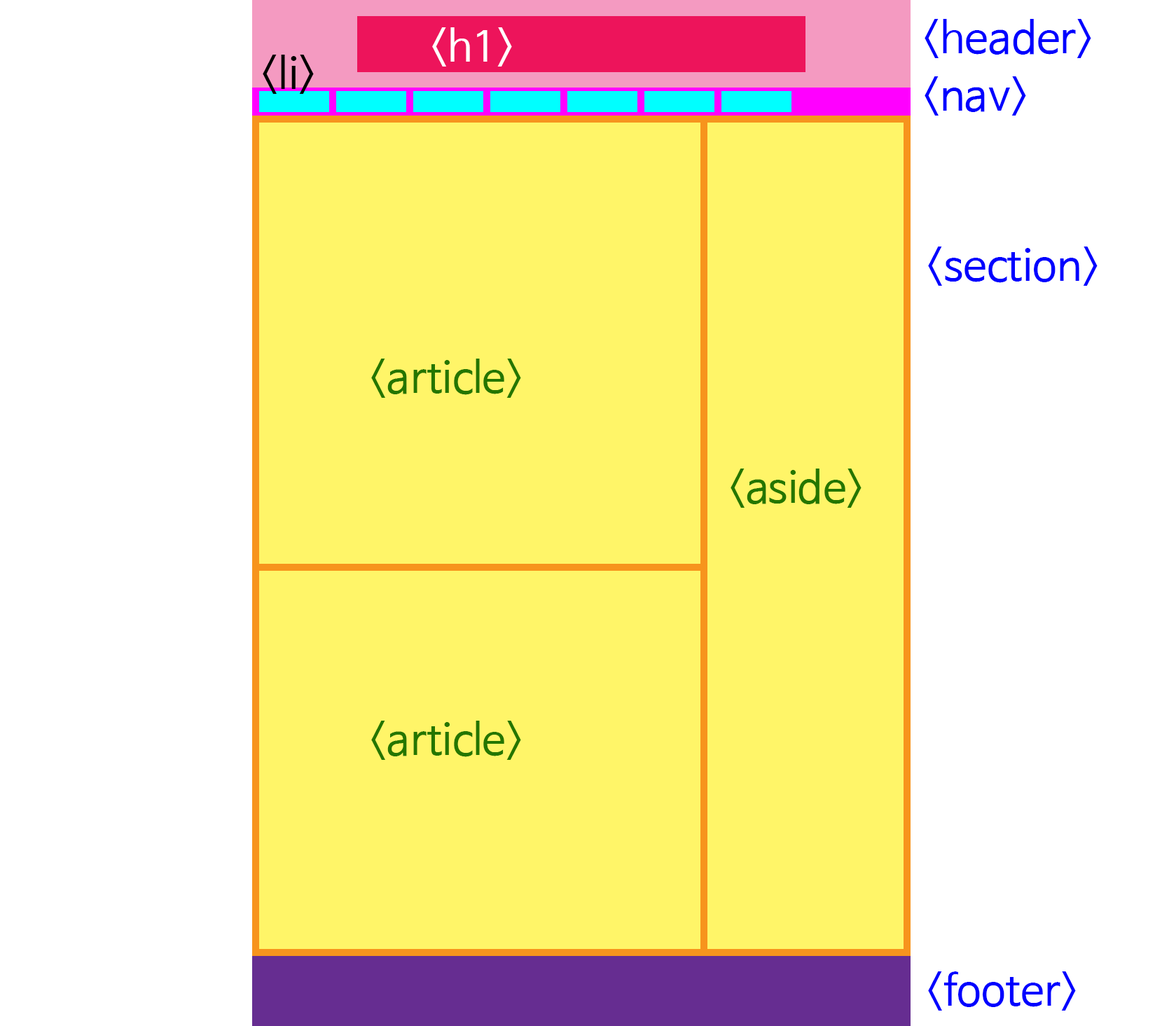
<style>
.page{position:relative;width:1162px;height:1026px;background:#ffffff}
.page>*{position:absolute;margin:0}
.t1{font:42px "NanumBarunGothic";color:#ffffff}
.t2{font:42px "NanumBarunGothic";color:#0000ff}
.t3{font:42px "NanumBarunGothic";color:#010101}
.t4{font:42px "NanumBarunGothic";color:#247600}
</style>
<div class="page">
<p class="t1" style="left:432px;top:27px;width:80px;height:40px">&lt;h1&gt;</p>
<p class="t2" style="left:925px;top:19px;width:166px;height:39px">&lt;header&gt;</p>
<p class="t3" style="left:263px;top:55px;width:51px;height:39px">&lt;li&gt;</p>
<p class="t2" style="left:925px;top:76px;width:101px;height:40px">&lt;nav&gt;</p>
<p class="t2" style="left:928px;top:247px;width:170px;height:39px">&lt;section&gt;</p>
<p class="t4" style="left:371px;top:359px;width:150px;height:39px">&lt;article&gt;</p>
<p class="t4" style="left:731px;top:469px;width:131px;height:39px">&lt;aside&gt;</p>
<p class="t4" style="left:371px;top:721px;width:150px;height:39px">&lt;article&gt;</p>
<p class="t2" style="left:928px;top:972px;width:148px;height:39px">&lt;footer&gt;</p>
</div>
